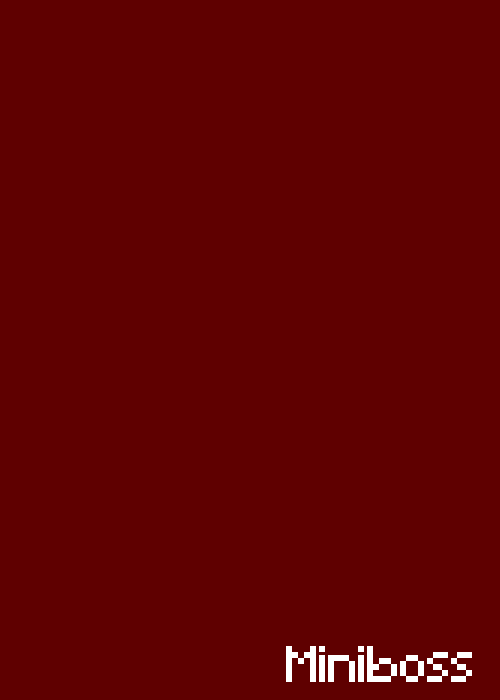
<style>
.page{position:relative;width:500px;height:700px;background:#5f0000}
.page>*{position:absolute;margin:0}
.t1{font:48px "Minecraft";color:#ffffff}
</style>
<div class="page">
<p class="t1" style="left:286px;top:646px;width:186px;height:36px">Miniboss</p>
</div>
